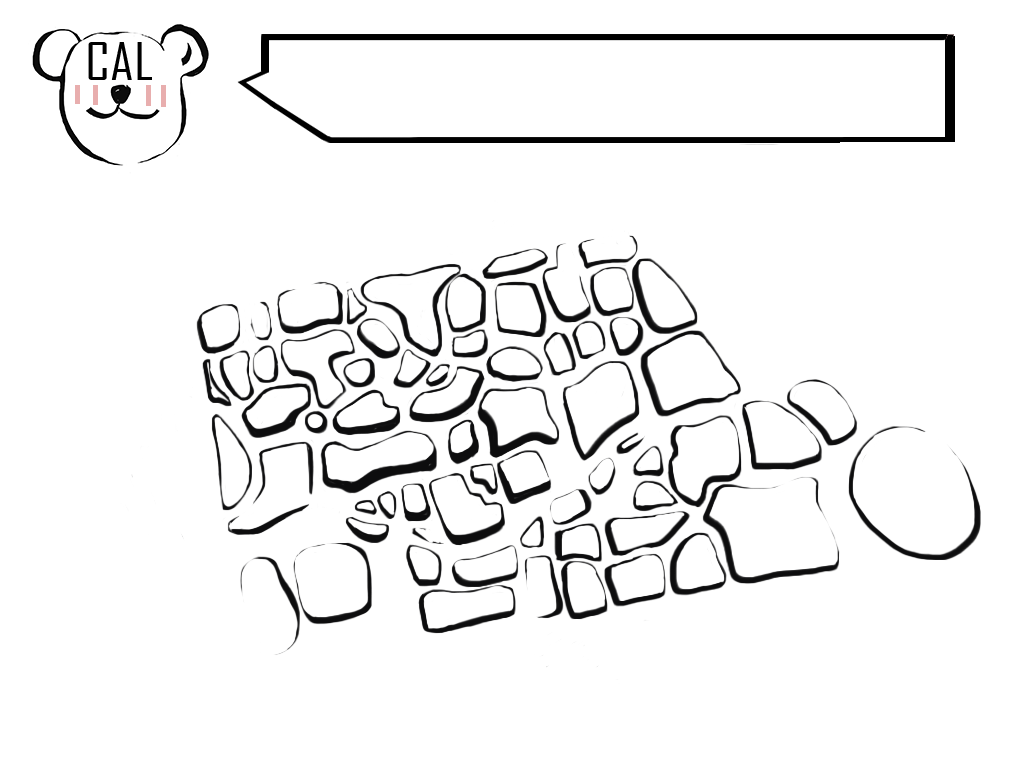
<style>
.page{position:relative;width:1024px;height:768px;background:#ffffff}
.page>*{position:absolute;margin:0}
.t1{font:49.9px "AgencyFB-Reg";color:#000000;scale:1.19 1}
</style>
<div class="page">
<p class="t1" style="left:88px;top:42px;width:64px;height:38px">CAL</p>
</div>
